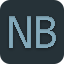
<style>
.page{position:relative;width:64px;height:64px;background:#263238}
.page>*{position:absolute;margin:0}
.t1{font:50px "Consolas";letter-spacing:-0.025em;color:#84aabb}
</style>
<div class="page">
<p class="t1" style="left:9px;top:16px;width:47px;height:32px">NB</p>
</div>
